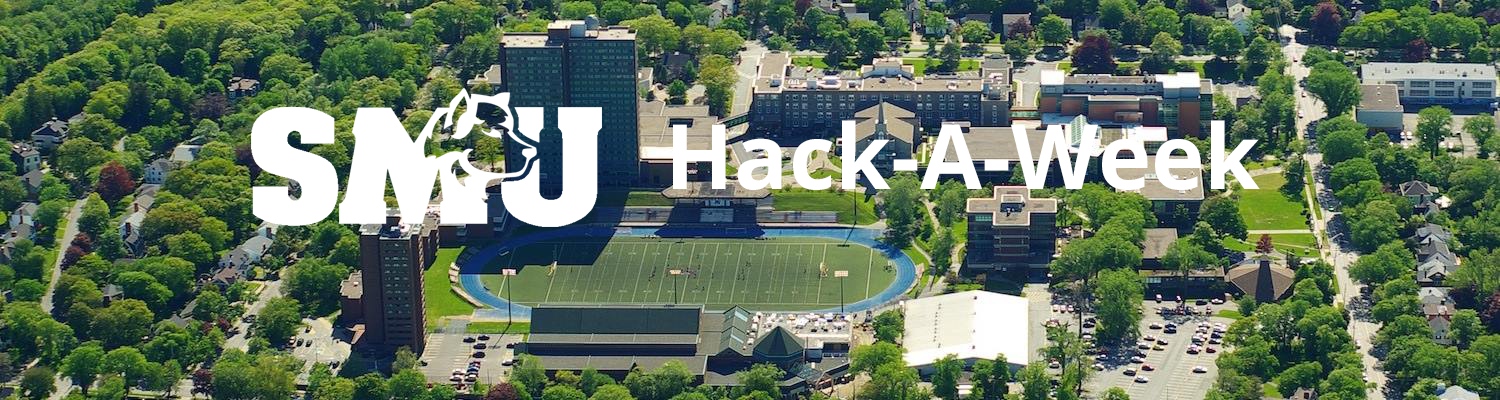
<style>
.page{position:relative;width:1500px;height:400px}
.page>*{position:absolute;margin:0}
.t1{font:90px "OpenSans-Bold";color:#ffffff}
</style>
<div class="page">
<p class="t1" style="left:673px;top:120px;width:587px;height:70px">Hack-A-Week</p>
</div>
